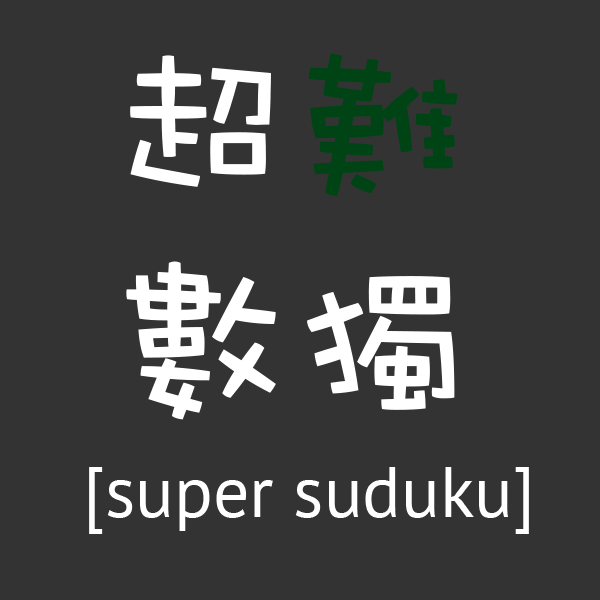
<style>
.page{position:relative;width:600px;height:600px;background:#333333}
.page>*{position:absolute;margin:0}
.t1{font:180px "DFWaWaSC-W5";color:#ffffff}
.t2{font:180px "DFWaWaSC-W5";color:#004415}
.t3{font:72px "PTSans-Regular";color:#ffffff}
</style>
<div class="page">
<p class="t1" style="left:126px;top:53px;width:332px;height:367px;text-align:center">超<span class="t2">難<br></span>數獨</p>
<p class="t3" style="left:89px;top:467px;width:440px;height:67px">[super suduku]</p>
</div>
